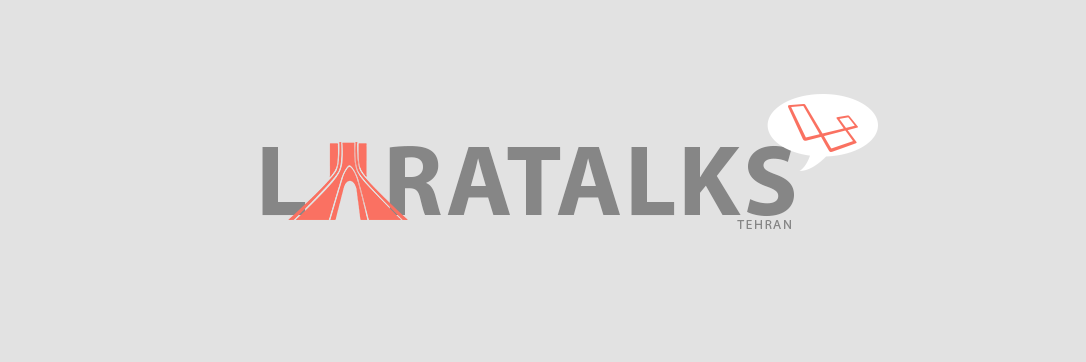
<style>
.page{position:relative;width:1086px;height:362px;background:#e2e2e2}
.page>*{position:absolute;margin:0}
.t1{font:101.3px "MyriadPro-Bold";color:#868686;text-transform:uppercase}
.t2{font:13.4px "MyriadPro-Regular";letter-spacing:0.1em;color:#868686;text-transform:uppercase}
</style>
<div class="page">
<p class="t1" style="left:262px;top:145px;width:532px;height:72px">L     ratalks</p>
<p class="t2" style="left:737px;top:220px;width:54px;height:9px">Tehran</p>
</div>
